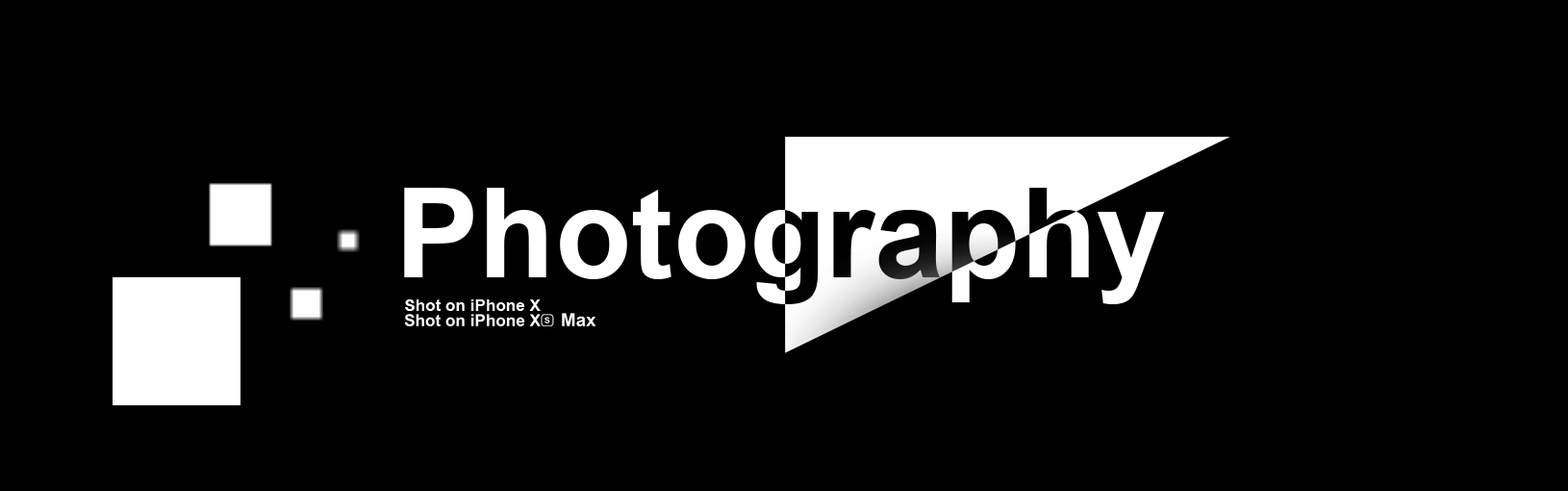
<style>
.page{position:relative;width:1568px;height:491px;background:#000000}
.page>*{position:absolute;margin:0}
.t1{font:125.1px "Arial-BoldMT";color:#ffffff}
.t2{font:16.5px "Arial-BoldMT";color:#ffffff}
</style>
<div class="page">
<p class="t1" style="left:404px;top:188px;width:761px;height:116px">Photography</p>
<p class="t2" style="left:405px;top:299px;width:136px;height:12px">Shot on iPhone X</p>
</div>
